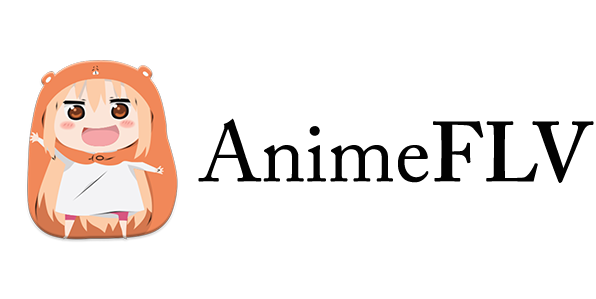
<style>
.page{position:relative;width:596px;height:299px;background:#ffffff}
.page>*{position:absolute;margin:0}
.t1{font:84px "ACaslonPro-Regular";color:#020202}
.t2{font:84px "ACaslonPro-Semibold";color:#020202}
</style>
<div class="page">
<p class="t1" style="left:198px;top:118px;width:396px;height:65px">Anime<span class="t2">FLV</span></p>
</div>
